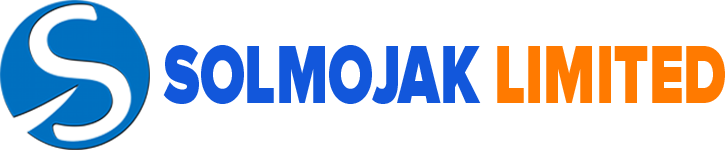
<style>
.page{position:relative;width:726px;height:150px;background:#ffffff}
.page>*{position:absolute;margin:0}
.t1{font:85.2px "ProximaNova-Black";color:#1257dc;scale:0.68 1}
.t2{font:85.2px "ProximaNova-Black";color:#ff7a00;scale:0.68 1}
</style>
<div class="page">
<p class="t1" style="left:163px;top:45px;width:562px;height:59px">SOLMOJAK <span class="t2">LIMITED</span></p>
</div>
